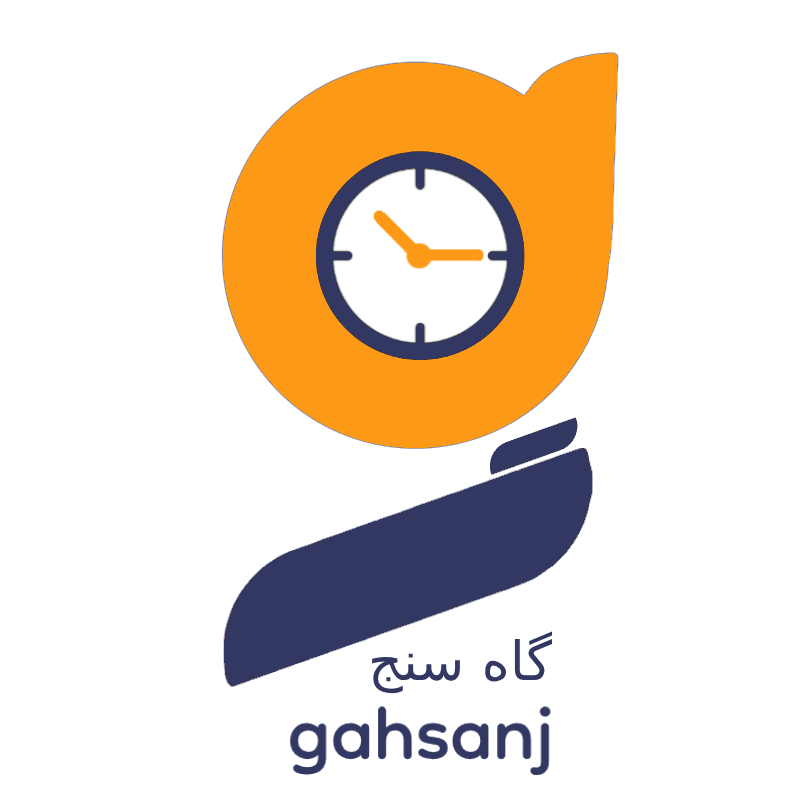
<style>
.page{position:relative;width:800px;height:800px;background:#ffffff}
.page>*{position:absolute;margin:0}
.t1{font:54px "DejaVuSans";color:#333863}
</style>
<div class="page">
<p class="t1" style="left:372px;top:631px;width:180px;height:63px">گاه سنج</p>
</div>
